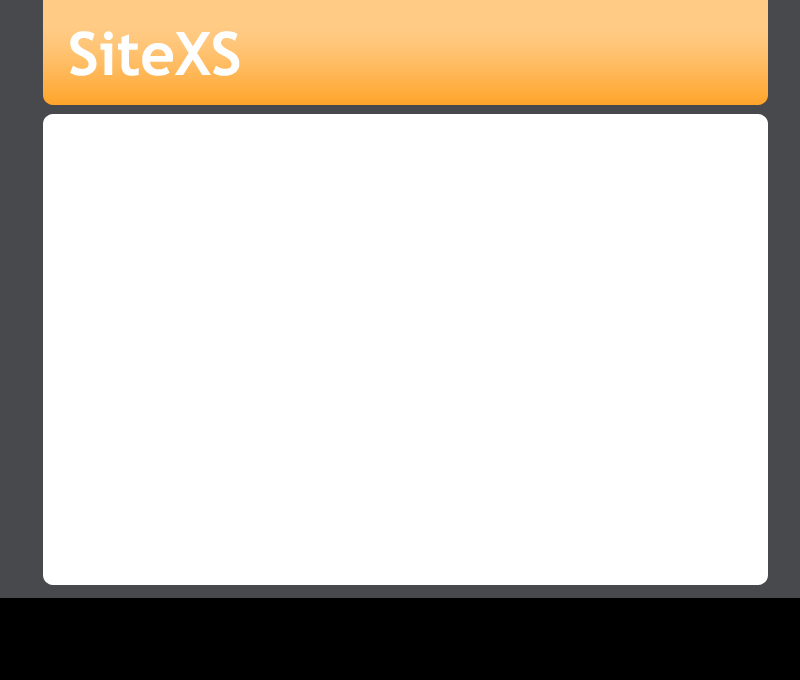
<style>
.page{position:relative;width:800px;height:680px;background:#ffffff}
.page>*{position:absolute;margin:0}
.t1{font:60px "TrebuchetMS-Bold";color:#fefefe}
</style>
<div class="page">
<p class="t1" style="left:70px;top:31px;width:170px;height:45px">SiteXS</p>
</div>
